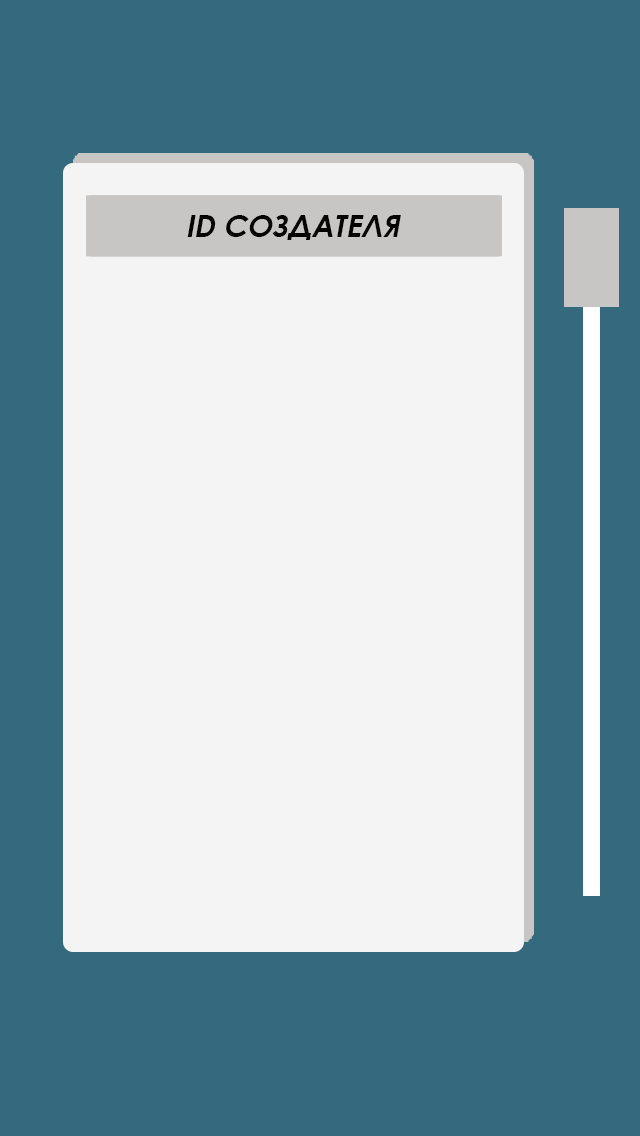
<style>
.page{position:relative;width:640px;height:1136px;background:#f4f4f4}
.page>*{position:absolute;margin:0}
.t1{font:30px "CenturyGothic-Bold";color:#030303;font-style:italic}
</style>
<div class="page">
<p class="t1" style="left:187px;top:215px;width:214px;height:25px">ID СОЗДАТЕЛЯ</p>
</div>
